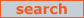
<style>
.page{position:relative;width:84px;height:18px;background:#c7cfd6}
.page>*{position:absolute;margin:0}
.t1{font:14px "Verdana-Bold";color:#f15b23}
</style>
<div class="page">
<p class="t1" style="left:16px;top:3px;width:51px;height:12px">search</p>
</div>
